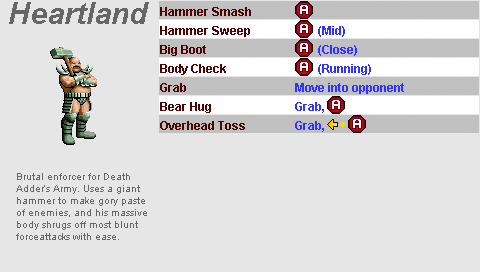
<style>
.page{position:relative;width:480px;height:272px;background:#e6e6e6}
.page>*{position:absolute;margin:0}
.t1{font:30px "Arial-BoldItalicMT";color:#666666}
.t2{font:12px "Arial-BoldMT";color:#4c0505}
.t3{font:12px "Arial-BoldMT";color:#3333ff}
.t4{font:12px "Arial-BoldMT";color:#ffdc00}
.t5{font:10px "ArialMT";color:#666666}
</style>
<div class="page">
<p class="t1" style="left:9px;top:2px;width:140px;height:22px">Heartland</p>
<p class="t2" style="left:160px;top:7px;width:91px;height:9px">Hammer Smash</p>
<p class="t2" style="left:160px;top:26px;width:90px;height:11px">Hammer Sweep</p>
<p class="t3" style="left:318px;top:26px;width:27px;height:11px">(Mid)</p>
<p class="t2" style="left:160px;top:45px;width:46px;height:11px">Big Boot</p>
<p class="t3" style="left:318px;top:45px;width:39px;height:11px">(Close)</p>
<p class="t2" style="left:160px;top:64px;width:66px;height:11px">Body Check</p>
<p class="t3" style="left:318px;top:64px;width:53px;height:11px">(Running)</p>
<p class="t2" style="left:160px;top:83px;width:26px;height:9px">Grab</p>
<p class="t3" style="left:295px;top:83px;width:109px;height:11px">Move into opponent</p>
<p class="t2" style="left:160px;top:102px;width:51px;height:11px">Bear Hug</p>
<p class="t3" style="left:295px;top:102px;width:29px;height:11px">Grab,</p>
<p class="t2" style="left:160px;top:121px;width:85px;height:9px">Overhead Toss</p>
<p class="t3" style="left:295px;top:121px;width:29px;height:11px">Grab,</p>
<p class="t4" style="left:340px;top:122px;width:6px;height:5px">+</p>
<p class="t5" style="left:16px;top:173px;width:131px;height:67px">Brutal enforcer for Death<br>Adder’s Army. Uses a giant <br>hammer to make gory paste<br>of enemies, and his massive<br>body shrugs off most blunt <br>forceattacks with ease.</p>
</div>
